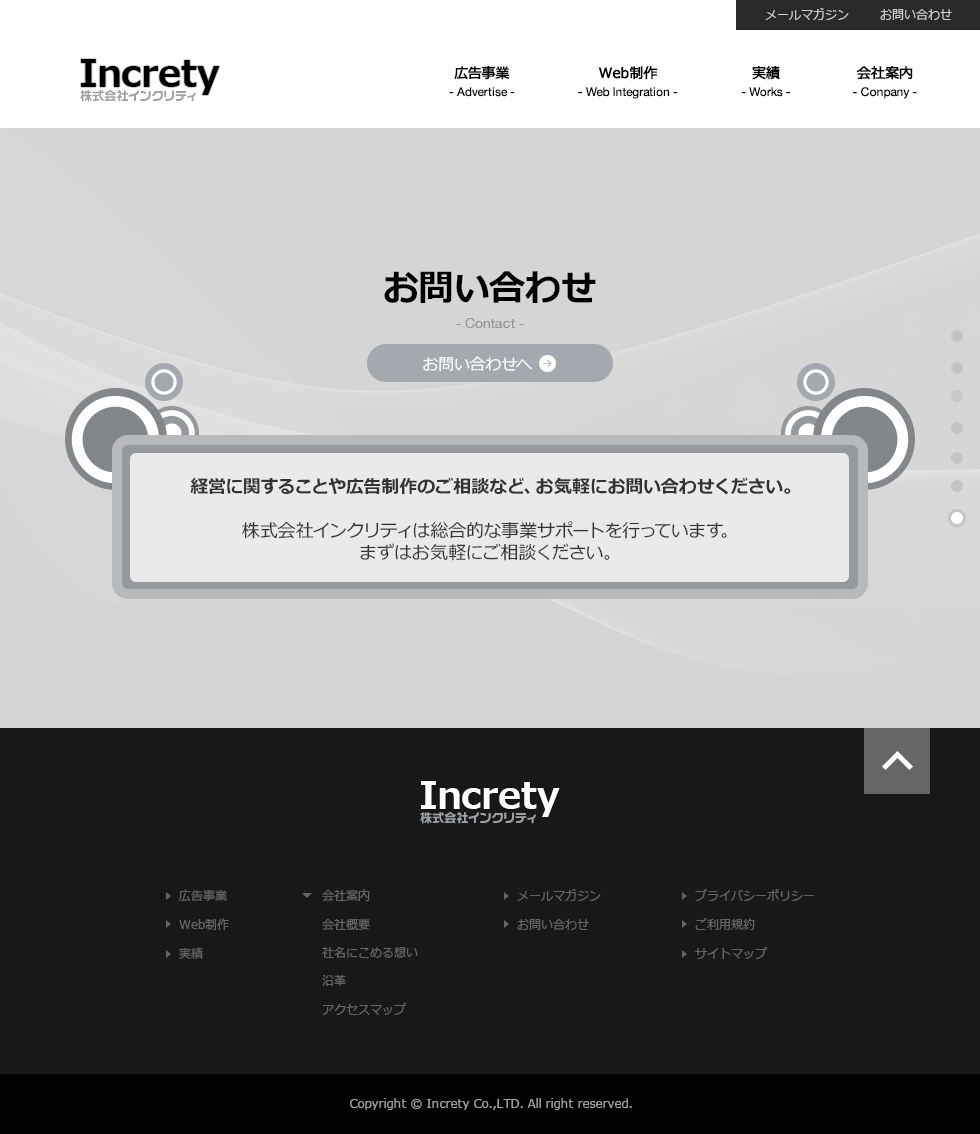
<style>
.page{position:relative;width:980px;height:1134px;background:#181818}
.page>*{position:absolute;margin:0}
.t1{font:12px "Meiryo";color:#cccccc}
.t2{font:36.6px "Meiryo-Bold";color:#000000}
.t3{font:14px "Meiryo";color:#000000;font-weight:bold}
.t4{font:12px "HelveticaNeue";color:#000000}
.t5{font:12px "VD-LogoMaru-Extra-G";color:#9da1a6}
.t6{font:36px "Meiryo-Bold";color:#000000}
.t7{font:14px "HelveticaNeue";color:#959595}
.t8{font:16px "Meiryo";color:#ffffff}
.t9{font:18px "Meiryo-Bold";color:#333333}
.t10{font:18px/22px "Meiryo";color:#333333}
.t11{font:36.6px "Meiryo-Bold";color:#ffffff}
.t12{font:12px "Meiryo";color:#666666}
.t13{font:12px "Verdana";color:#9da1a6}
</style>
<div class="page">
<p class="t1" style="left:765px;top:8px;width:84px;height:12px">メールマガジン</p>
<p class="t1" style="left:880px;top:9px;width:72px;height:11px">お問い合わせ</p>
<p class="t2" style="left:81px;top:59px;width:139px;height:36px">Increty</p>
<p class="t3" style="left:454px;top:66px;width:56px;height:14px">広告事業</p>
<p class="t3" style="left:598px;top:66px;width:60px;height:14px">Web制作</p>
<p class="t3" style="left:752px;top:66px;width:28px;height:14px">実績</p>
<p class="t3" style="left:856px;top:66px;width:57px;height:14px">会社案内</p>
<p class="t4" style="left:449px;top:87px;width:66px;height:10px">- Advertise -</p>
<p class="t4" style="left:578px;top:87px;width:100px;height:12px">- Web Integration -</p>
<p class="t4" style="left:741px;top:87px;width:49px;height:10px">- Works -</p>
<p class="t4" style="left:853px;top:87px;width:64px;height:12px">- Conpany -</p>
<p class="t5" style="left:80px;top:90px;width:116px;height:12px">株式会社インクリティ</p>
<p class="t6" style="left:384px;top:271px;width:212px;height:32px">お問い合わせ</p>
<p class="t7" style="left:456px;top:318px;width:68px;height:10px">- Contact -</p>
<p class="t8" style="left:423px;top:356px;width:109px;height:16px">お問い合わせへ</p>
<p class="t9" style="left:190px;top:477px;width:601px;height:18px">経営に関することや広告制作のご相談など、お気軽にお問い合わせください。</p>
<p class="t10" style="left:242px;top:521px;width:485px;height:40px;text-align:center">株式会社インクリティは総合的な事業サポートを行っています。<br>まずはお気軽にご相談ください。</p>
<p class="t11" style="left:421px;top:781px;width:139px;height:36px">Increty</p>
<p class="t5" style="left:420px;top:812px;width:116px;height:12px">株式会社インクリティ</p>
<p class="t12" style="left:179px;top:889px;width:48px;height:12px">広告事業</p>
<p class="t12" style="left:322px;top:889px;width:48px;height:12px">会社案内</p>
<p class="t12" style="left:517px;top:889px;width:84px;height:12px">メールマガジン</p>
<p class="t12" style="left:695px;top:889px;width:119px;height:12px">プライバシーポリシー</p>
<p class="t12" style="left:179px;top:918px;width:50px;height:12px">Web制作</p>
<p class="t12" style="left:322px;top:918px;width:48px;height:12px">会社概要</p>
<p class="t12" style="left:695px;top:918px;width:60px;height:12px">ご利用規約</p>
<p class="t12" style="left:517px;top:919px;width:72px;height:11px">お問い合わせ</p>
<p class="t12" style="left:179px;top:947px;width:24px;height:12px">実績</p>
<p class="t12" style="left:322px;top:946px;width:96px;height:12px">社名にこめる想い</p>
<p class="t12" style="left:695px;top:947px;width:72px;height:12px">サイトマップ</p>
<p class="t12" style="left:322px;top:974px;width:24px;height:12px">沿革</p>
<p class="t12" style="left:322px;top:1003px;width:84px;height:12px">アクセスマップ</p>
<p class="t13" style="left:350px;top:1098px;width:282px;height:12px">Copyright © Increty Co.,LTD. All right reserved.</p>
</div>
